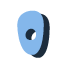
<style>
.page{position:relative;width:64px;height:64px;background:#ffffff}
.page>*{position:absolute;margin:0}
.t1{font:66px "Samba";color:#84b7eb}
.t2{font:66px "Samba"}
</style>
<div class="page">
<p class="t1" style="left:17px;top:10px;width:27px;height:45px">0</p>
<p class="t2" style="left:23px;top:13px;width:27px;height:45px">0</p>
</div>
